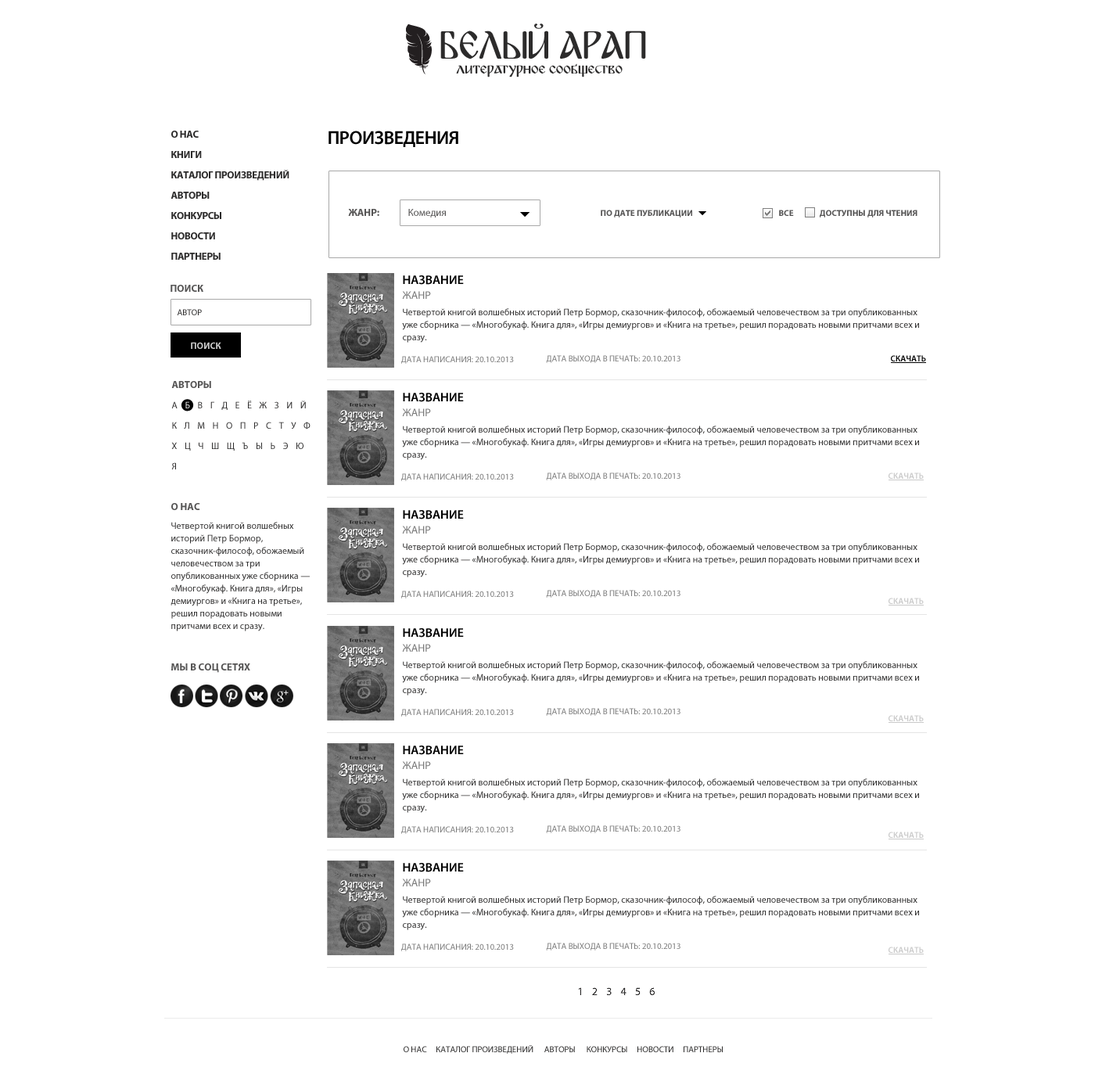
<style>
.page{position:relative;width:1095px;height:1089px;background:#ffffff}
.page>*{position:absolute;margin:0}
.t1{font:40.3px "BulgariaModernaV3";color:#2c2b2b;text-transform:uppercase}
.t2{font:17.2px "BulgariaModernaV3";color:#2c2b2b}
.t3{font:10.2px/20.3px "MyriadPro-Bold";letter-spacing:-0.025em;color:#2c2b2b;text-transform:uppercase}
.t4{font:18.8px "MyriadPro-Semibold";letter-spacing:-0.025em;color:#000000;text-transform:uppercase}
.t5{font:10.2px "MyriadPro-Bold";color:#565555;text-transform:uppercase}
.t6{font:10.2px "MyriadPro-Regular";color:#565555}
.t7{font:8.6px "MyriadPro-Bold";color:#565555;text-transform:uppercase}
.t8{font:12.5px "MyriadPro-Semibold";color:#000000;text-transform:uppercase}
.t9{font:11px "MyriadPro-Regular";color:#7a7a7a;text-transform:uppercase}
.t10{font:8.6px "MyriadPro-Regular";color:#2c2b2b;text-transform:uppercase}
.t11{font:9.4px/12.5px "MyriadPro-Regular";color:#2c2b2b}
.t12{font:9.4px "MyriadPro-Bold";color:#cccccc;text-transform:uppercase}
.t13{font:8.6px "MyriadPro-Regular";color:#7a7a7a;text-transform:uppercase}
.t14{font:8.6px "MyriadPro-Semibold";color:#000000;text-transform:uppercase}
.t15{font:9.4px/20.3px "MyriadPro-Regular";letter-spacing:0.8em;color:#2c2b2b;text-transform:uppercase}
.t16{font:9.4px/20.3px "MyriadPro-Regular";letter-spacing:0.8em;color:#ffffff;text-transform:uppercase}
</style>
<div class="page">
<p class="t1" style="left:440px;top:23px;width:206px;height:36px">Белый Арап</p>
<p class="t2" style="left:456px;top:63px;width:167px;height:14px">литературное сообщество</p>
<p class="t3" style="left:171px;top:131px;width:118px;height:129px">о нас<br>книги<br>каталог произведений<br>авторы<br>конкурсы<br>новости <br>партнеры</p>
<p class="t4" style="left:329px;top:131px;width:129px;height:16px">произведения</p>
<p class="t5" style="left:348px;top:209px;width:31px;height:7px">жанр:</p>
<p class="t6" style="left:408px;top:209px;width:38px;height:8px">Комедия</p>
<p class="t7" style="left:601px;top:210px;width:91px;height:7px">по дате публикации</p>
<p class="t7" style="left:779px;top:210px;width:139px;height:7px">все               доступны для чтения</p>
<p class="t8" style="left:403px;top:275px;width:61px;height:10px">название</p>
<p class="t5" style="left:171px;top:285px;width:32px;height:7px">поиск</p>
<p class="t9" style="left:402px;top:291px;width:29px;height:8px">жанр</p>
<p class="t10" style="left:177px;top:309px;width:25px;height:6px">автор</p>
<p class="t11" style="left:402px;top:308px;width:517px;height:35px">Четвертой книгой волшебных историй Петр Бормор, сказочник-философ, обожаемый человечеством за три опубликованных уже сборника — «Многобукаф. Книга для», «Игры демиургов» и «Книга на третье», решил порадовать новыми притчами всех и сразу.<br>«Запасная книжка» — это сказки с изрядной долей светлого юмора и мудрости для читателя любого роста.</p>
<p class="t12" style="left:191px;top:342px;width:30px;height:7px">поиск</p>
<p class="t13" style="left:401px;top:356px;width:113px;height:8px">дата написания: 20.10.2013</p>
<p class="t13" style="left:546px;top:355px;width:135px;height:8px">дата выхода в печать: 20.10.2013</p>
<p class="t14" style="left:891px;top:355px;width:35px;height:6px">скачать</p>
<p class="t5" style="left:171px;top:381px;width:40px;height:7px">авторы</p>
<p class="t15" style="left:171px;top:401px;width:140px;height:68px">А<span class="t16">Б</span>ВГДЕЁЖЗИЙКЛМНОПРСТУФХЦЧШЩЪЫЬЭЮЯ</p>
<p class="t8" style="left:403px;top:393px;width:61px;height:9px">название</p>
<p class="t9" style="left:402px;top:408px;width:29px;height:8px">жанр</p>
<p class="t11" style="left:402px;top:426px;width:517px;height:34px">Четвертой книгой волшебных историй Петр Бормор, сказочник-философ, обожаемый человечеством за три опубликованных уже сборника — «Многобукаф. Книга для», «Игры демиургов» и «Книга на третье», решил порадовать новыми притчами всех и сразу.<br>«Запасная книжка» — это сказки с изрядной долей светлого юмора и мудрости для читателя любого роста.</p>
<p class="t13" style="left:401px;top:473px;width:113px;height:8px">дата написания: 20.10.2013</p>
<p class="t13" style="left:546px;top:472px;width:135px;height:8px">дата выхода в печать: 20.10.2013</p>
<p class="t5" style="left:171px;top:503px;width:29px;height:7px">о нас</p>
<p class="t11" style="left:171px;top:522px;width:139px;height:109px">Четвертой книгой волшебных историй Петр Бормор, сказочник-философ, обожаемый человечеством за три опубликованных уже сборника — «Многобукаф. Книга для», «Игры демиургов» и «Книга на третье», решил порадовать новыми притчами всех и сразу.<br>«Запасная книжка» — это сказки с изрядной долей светлого юмора и мудрости для читателя любого роста.</p>
<p class="t8" style="left:403px;top:510px;width:61px;height:9px">название</p>
<p class="t9" style="left:402px;top:526px;width:29px;height:7px">жанр</p>
<p class="t11" style="left:402px;top:543px;width:517px;height:34px">Четвертой книгой волшебных историй Петр Бормор, сказочник-философ, обожаемый человечеством за три опубликованных уже сборника — «Многобукаф. Книга для», «Игры демиургов» и «Книга на третье», решил порадовать новыми притчами всех и сразу.<br>«Запасная книжка» — это сказки с изрядной долей светлого юмора и мудрости для читателя любого роста.</p>
<p class="t13" style="left:401px;top:591px;width:113px;height:7px">дата написания: 20.10.2013</p>
<p class="t13" style="left:546px;top:590px;width:135px;height:8px">дата выхода в печать: 20.10.2013</p>
<p class="t8" style="left:403px;top:628px;width:61px;height:10px">название</p>
<p class="t9" style="left:402px;top:644px;width:29px;height:8px">жанр</p>
<p class="t5" style="left:171px;top:663px;width:79px;height:10px">мы в соц сетях</p>
<p class="t11" style="left:402px;top:661px;width:517px;height:34px">Четвертой книгой волшебных историй Петр Бормор, сказочник-философ, обожаемый человечеством за три опубликованных уже сборника — «Многобукаф. Книга для», «Игры демиургов» и «Книга на третье», решил порадовать новыми притчами всех и сразу.<br>«Запасная книжка» — это сказки с изрядной долей светлого юмора и мудрости для читателя любого роста.</p>
<p class="t13" style="left:401px;top:709px;width:113px;height:8px">дата написания: 20.10.2013</p>
<p class="t13" style="left:546px;top:708px;width:135px;height:8px">дата выхода в печать: 20.10.2013</p>
<p class="t8" style="left:403px;top:745px;width:61px;height:10px">название</p>
<p class="t9" style="left:402px;top:761px;width:29px;height:8px">жанр</p>
<p class="t11" style="left:402px;top:778px;width:517px;height:35px">Четвертой книгой волшебных историй Петр Бормор, сказочник-философ, обожаемый человечеством за три опубликованных уже сборника — «Многобукаф. Книга для», «Игры демиургов» и «Книга на третье», решил порадовать новыми притчами всех и сразу.<br>«Запасная книжка» — это сказки с изрядной долей светлого юмора и мудрости для читателя любого роста.</p>
<p class="t13" style="left:401px;top:826px;width:113px;height:8px">дата написания: 20.10.2013</p>
<p class="t13" style="left:546px;top:825px;width:135px;height:8px">дата выхода в печать: 20.10.2013</p>
<p class="t8" style="left:403px;top:863px;width:61px;height:9px">название</p>
<p class="t9" style="left:402px;top:878px;width:29px;height:8px">жанр</p>
<p class="t11" style="left:402px;top:896px;width:517px;height:34px">Четвертой книгой волшебных историй Петр Бормор, сказочник-философ, обожаемый человечеством за три опубликованных уже сборника — «Многобукаф. Книга для», «Игры демиургов» и «Книга на третье», решил порадовать новыми притчами всех и сразу.<br>«Запасная книжка» — это сказки с изрядной долей светлого юмора и мудрости для читателя любого роста.</p>
<p class="t13" style="left:401px;top:943px;width:113px;height:8px">дата написания: 20.10.2013</p>
<p class="t13" style="left:546px;top:943px;width:135px;height:7px">дата выхода в печать: 20.10.2013</p>
<p class="t10" style="left:404px;top:1045px;width:319px;height:9px">о нас     каталог произведений      авторы      конкурсы     новости     партнеры</p>
</div>
